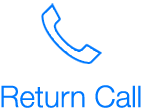
<style>
.page{position:relative;width:144px;height:111px;background:#ffffff}
.page>*{position:absolute;margin:0}
.t1{font:30px "HelveticaNeueLTCom-Lt";color:#0079ff}
</style>
<div class="page">
<p class="t1" style="left:1px;top:85px;width:140px;height:23px">Return Call</p>
</div>
